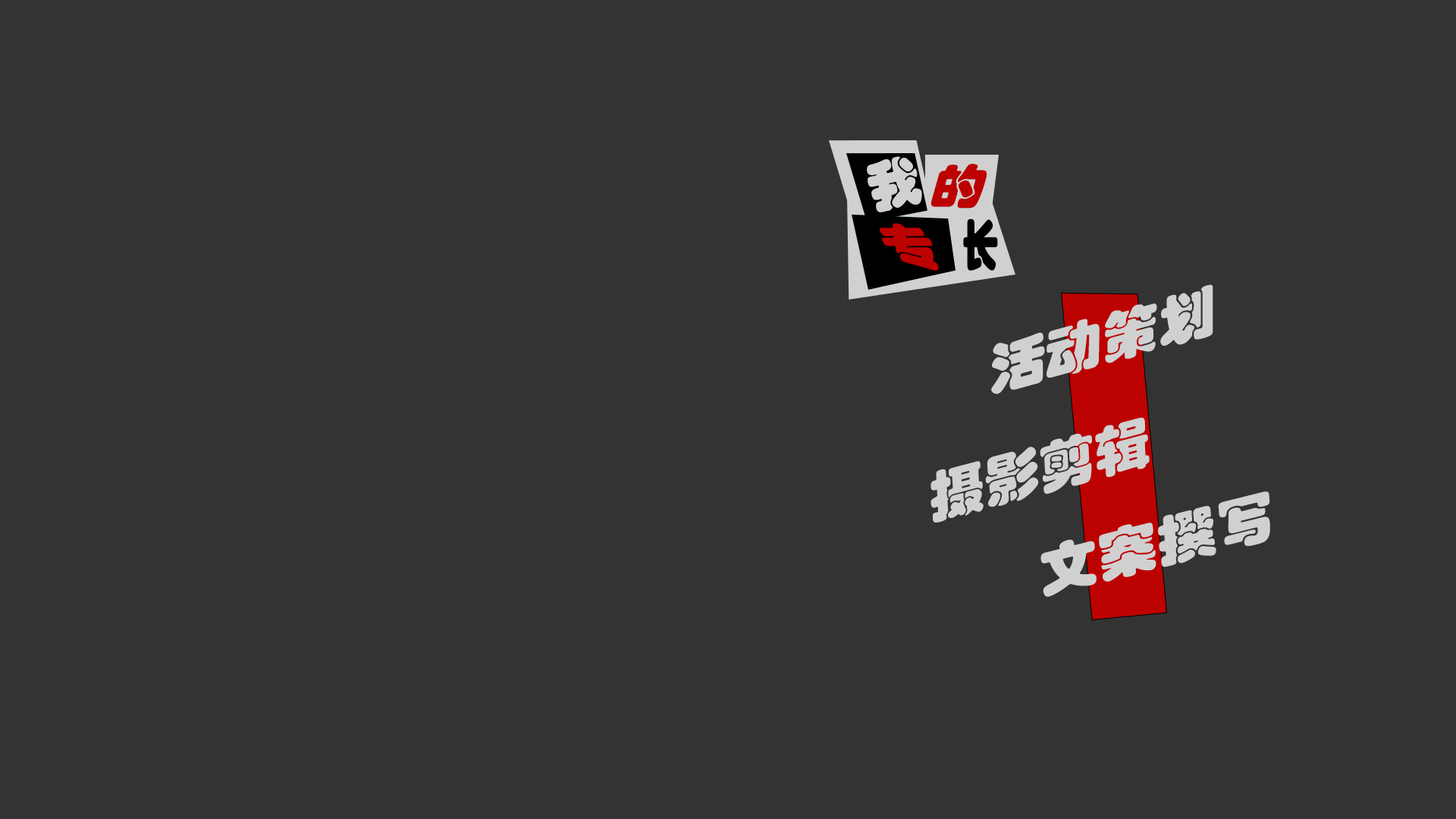
<style>
.page{position:relative;width:1456px;height:819px;background:#333333}
.page>*{position:absolute;margin:0}
.t1{font:54.6px "STHupo";color:#d0d0d0}
.t2{font:48.7px "STHupo";color:#bc0101;scale:1.12 1}
.t3{font:54.6px "STHupo";color:#000000;scale:0.67 1}
.t4{font:57.1px "STHupo";color:#bc0101;scale:0.96 1}
.t5{font:54.6px "STHupo";color:#d0d0d0;scale:1.07 1}
.t6{font:54.6px "STHupo";color:#d0d0d0;scale:1.05 1}
.t7{font:54.6px "STHupo";color:#d0d0d0;scale:1.12 1}
</style>
<div class="page">
<p class="t1" style="left:867px;top:156px;width:55px;height:56px;rotate:-12deg">我</p>
<p class="t2" style="left:930px;top:164px;width:57px;height:45px">的</p>
<p class="t3" style="left:963px;top:218px;width:35px;height:53px">长</p>
<p class="t4" style="left:880px;top:223px;width:59px;height:48px">专</p>
<p class="t5" style="left:991px;top:284px;width:222px;height:110px;rotate:-15deg">活动策划</p>
<p class="t6" style="left:930px;top:417px;width:220px;height:105px;rotate:-15deg">摄影剪辑</p>
<p class="t7" style="left:1040px;top:491px;width:230px;height:106px;rotate:-14deg">文案撰写</p>
</div>
